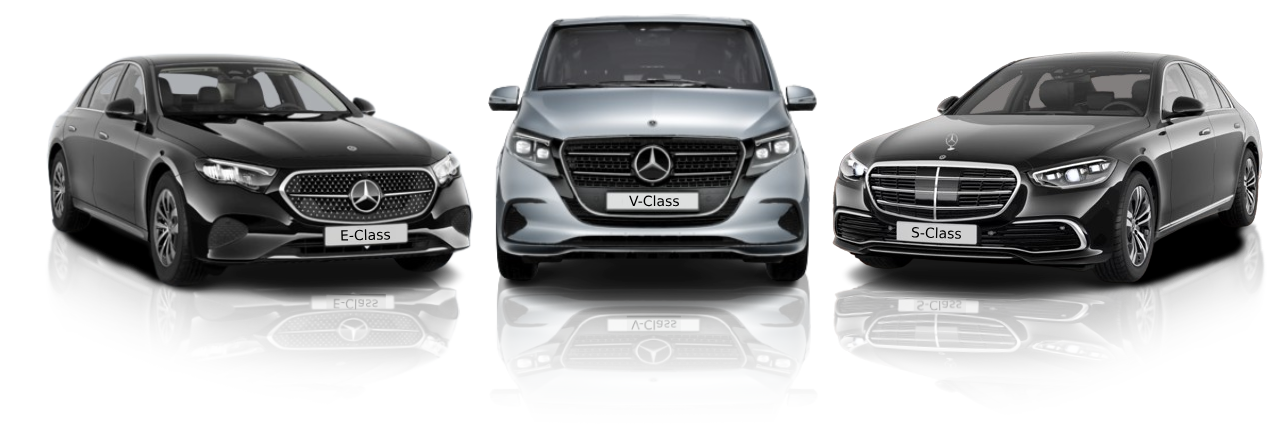
<style>
.page{position:relative;width:1288px;height:436px;background:#ffffff}
.page>*{position:absolute;margin:0}
.t1{font:14px "DejaVuSans";color:#000000}
</style>
<div class="page">
<p class="t1" style="left:629px;top:195px;width:50px;height:12px">V-Class</p>
<p class="t1" style="left:341px;top:229px;width:50px;height:12px;rotate:-1deg">E-Class</p>
<p class="t1" style="left:911px;top:226px;width:51px;height:13px;rotate:2deg">S-Class</p>
</div>
